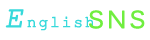
<style>
.page{position:relative;width:150px;height:40px;background:#ffffff}
.page>*{position:absolute;margin:0}
.t1{font:16px "CourierNewPSMT";letter-spacing:0.1em;color:#37d9db;font-weight:bold}
.t2{font:30px "CourierNewPSMT";letter-spacing:0.1em;color:#37d9db;font-weight:bold;font-style:italic}
.t3{font:24px "Kalinga";letter-spacing:0.1em;color:#70ee3f;font-weight:bold}
</style>
<div class="page">
<p class="t1" style="left:5px;top:9px;width:90px;height:22px"><span class="t2">E</span>nglish</p>
<p class="t3" style="left:89px;top:10px;width:56px;height:19px">SNS</p>
</div>
